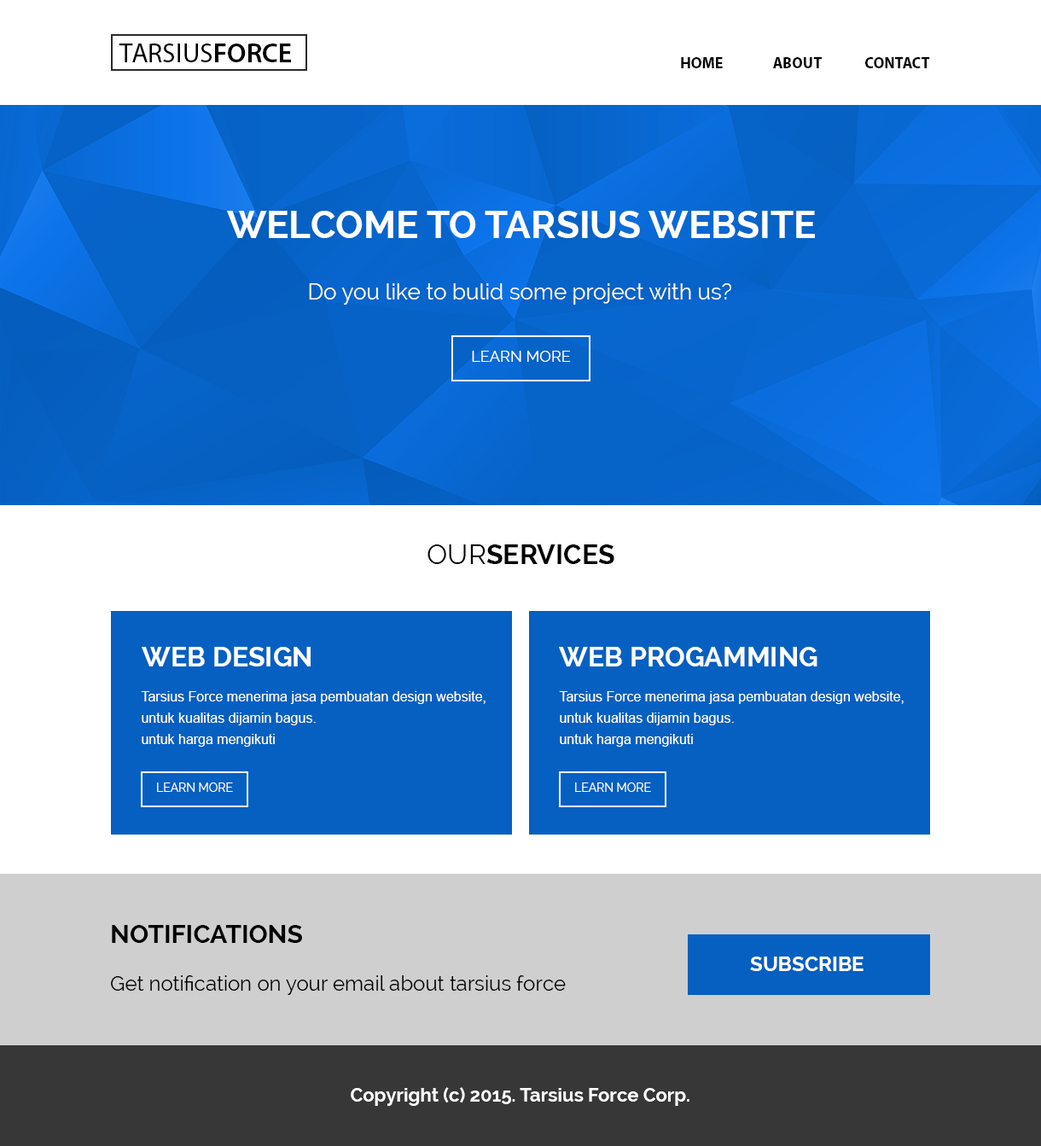
<style>
.page{position:relative;width:1041px;height:1146px;background:#ffffff}
.page>*{position:absolute;margin:0}
.t1{font:15.4px "MyriadPro-Bold";color:#000000}
.t2{font:37.5px "Raleway-Bold";color:#ffffff}
.t3{font:22.2px "Raleway";color:#ffffff}
.t4{font:15.4px "Raleway";color:#ffffff}
.t5{font:27.3px "Raleway-Bold";color:#000000}
.t6{font:27.3px "Raleway";color:#000000}
.t7{font:27.3px "Raleway-Bold";color:#ffffff}
.t8{font:13.6px/21.3px "ArialMT";color:#ffffff}
.t9{font:11.9px "Raleway";color:#ffffff}
.t10{font:25.6px "Raleway-Bold";color:#000000}
.t11{font:20.5px "Raleway-Bold";color:#ffffff;text-transform:uppercase}
.t12{font:20.5px "Raleway";color:#000000}
.t13{font:18.8px "Raleway-Bold";color:#ffffff}
</style>
<div class="page">
<p class="t1" style="left:681px;top:57px;width:249px;height:11px">HOME  ABOUT  CONTACT</p>
<p class="t2" style="left:227px;top:211px;width:588px;height:27px">WELCOME TO TARSIUS WEBSITE</p>
<p class="t3" style="left:309px;top:283px;width:422px;height:22px">Do you like to bulid some project with us?</p>
<p class="t4" style="left:472px;top:351px;width:99px;height:11px">LEARN MORE</p>
<p class="t5" style="left:427px;top:544px;width:187px;height:20px"><span class="t6">OUR</span>SERVICES</p>
<p class="t7" style="left:142px;top:647px;width:169px;height:19px">WEB DESIGN</p>
<p class="t7" style="left:559px;top:647px;width:258px;height:19px">WEB PROGAMMING</p>
<p class="t8" style="left:141px;top:691px;width:344px;height:55px">Tarsius Force menerima jasa pembuatan design website, <br>untuk kualitas dijamin bagus. <br>untuk harga mengikuti</p>
<p class="t8" style="left:559px;top:691px;width:344px;height:55px">Tarsius Force menerima jasa pembuatan design website, <br>untuk kualitas dijamin bagus. <br>untuk harga mengikuti</p>
<p class="t9" style="left:157px;top:782px;width:76px;height:10px">LEARN MORE</p>
<p class="t9" style="left:575px;top:782px;width:76px;height:10px">LEARN MORE</p>
<p class="t10" style="left:112px;top:925px;width:190px;height:18px">NOTIFICATIONS</p>
<p class="t11" style="left:750px;top:956px;width:113px;height:15px">SUBSCRIBE</p>
<p class="t12" style="left:111px;top:975px;width:455px;height:20px">Get notification on your email about tarsius force</p>
<p class="t13" style="left:351px;top:1087px;width:338px;height:19px">Copyright (c) 2015. Tarsius Force Corp.</p>
</div>
